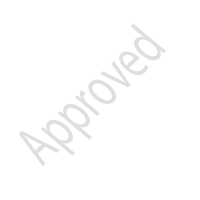
<style>
.page{position:relative;width:200px;height:200px;background:#ffffff}
.page>*{position:absolute;margin:0}
.t1{font:60.1px "MyriadPro-Regular";color:#dfdfdf;scale:0.69 1}
</style>
<div class="page">
<p class="t1" style="left:18px;top:23px;width:148px;height:144px;rotate:-43deg">Approved</p>
</div>
